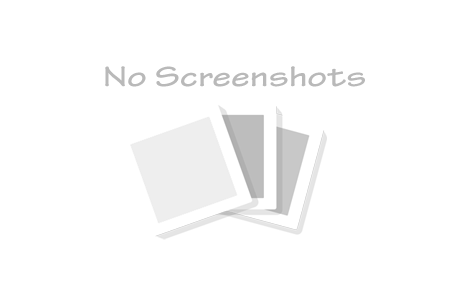
<style>
.page{position:relative;width:470px;height:300px;background:#ffffff}
.page>*{position:absolute;margin:0}
.t1{font:30px "TektonPro-BoldExt";letter-spacing:0.01em;color:#b9b9b9}
</style>
<div class="page">
<p class="t1" style="left:105px;top:66px;width:260px;height:21px">No Screenshots</p>
</div>
